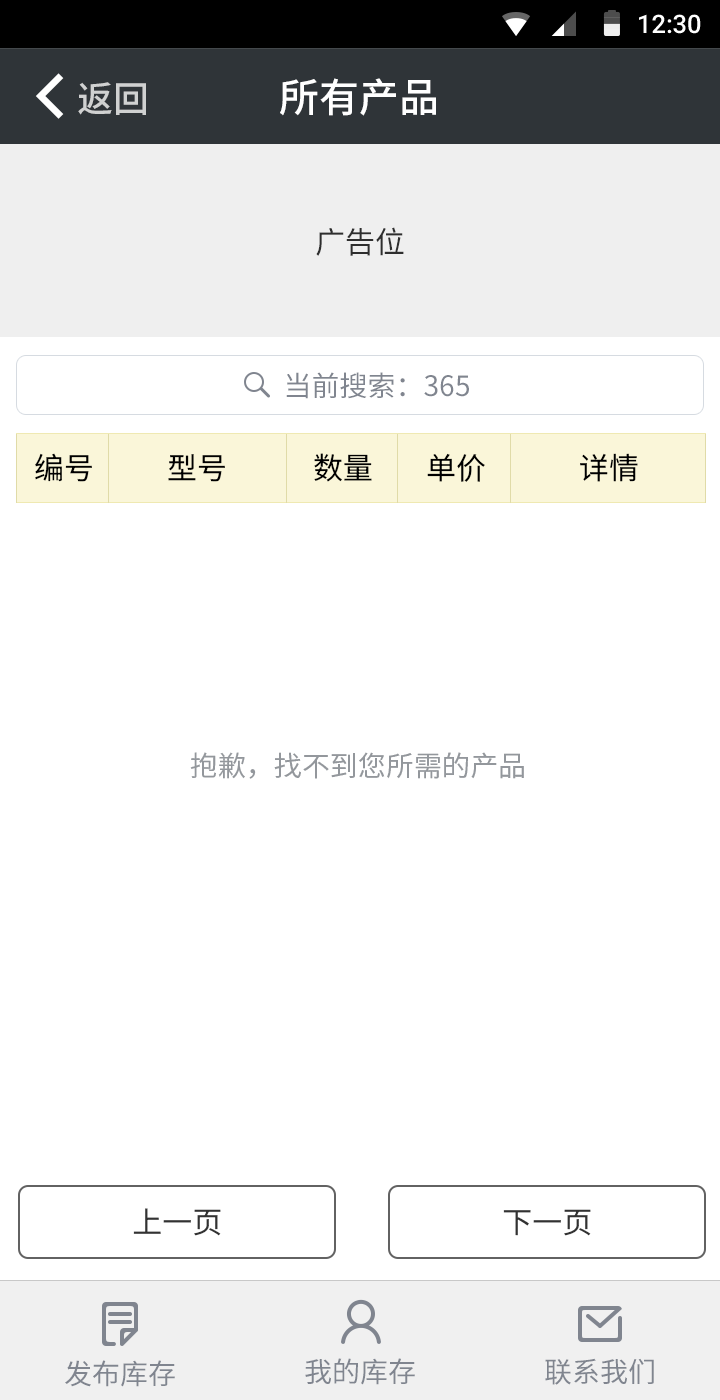
<style>
.page{position:relative;width:720px;height:1400px;background:#ffffff}
.page>*{position:absolute;margin:0}
.t1{font:25.4px "Roboto-Medium";color:#ffffff}
.t2{font:40px "SourceHanSansCN-Medium";color:#ffffff}
.t3{font:36px "SourceHanSansCN-Medium";color:#d0d1d1}
.t4{font:30px "SourceHanSansCN-Regular";color:#2e2e2e}
.t5{font:28px "SourceHanSansCN-Regular";color:#80858f}
.t6{font:30px "SourceHanSansCN-Regular";color:#000000}
.t7{font:28px "SourceHanSansCN-Regular";color:#93979c}
.t8{font:30px "SourceHanSansCN-Regular";color:#323232}
</style>
<div class="page">
<p class="t1" style="left:639px;top:14px;width:62px;height:20px">12:30</p>
<p class="t2" style="left:280px;top:78px;width:156px;height:38px">所有产品</p>
<p class="t3" style="left:78px;top:82px;width:68px;height:33px">返回</p>
<p class="t4" style="left:316px;top:227px;width:88px;height:29px">广告位</p>
<p class="t5" style="left:286px;top:372px;width:183px;height:27px">当前搜索：365</p>
<p class="t6" style="left:35px;top:453px;width:57px;height:29px">编号</p>
<p class="t6" style="left:168px;top:454px;width:57px;height:28px">型号</p>
<p class="t6" style="left:314px;top:453px;width:58px;height:29px">数量</p>
<p class="t6" style="left:427px;top:453px;width:58px;height:29px">单价</p>
<p class="t6" style="left:580px;top:453px;width:58px;height:29px">详情</p>
<p class="t7" style="left:190px;top:752px;width:334px;height:27px">抱歉，找不到您所需的产品</p>
<p class="t8" style="left:133px;top:1208px;width:88px;height:28px">上一页</p>
<p class="t8" style="left:503px;top:1209px;width:88px;height:27px">下一页</p>
<p class="t5" style="left:65px;top:1360px;width:110px;height:27px">发布库存</p>
<p class="t5" style="left:305px;top:1358px;width:110px;height:27px">我的库存</p>
<p class="t5" style="left:545px;top:1358px;width:109px;height:27px">联系我们</p>
</div>
